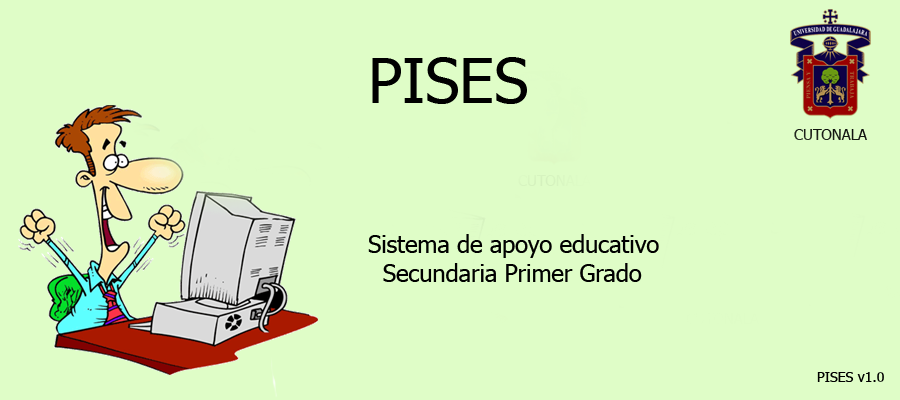
<style>
.page{position:relative;width:900px;height:400px;background:#dffdc7}
.page>*{position:absolute;margin:0}
.t1{font:61.8px "Tahoma";color:#000000}
.t2{font:23.6px "Tahoma";color:#000000}
.t3{font:14px "Tahoma";color:#000000}
</style>
<div class="page">
<p class="t1" style="left:372px;top:57px;width:155px;height:47px">PISES</p>
<p class="t2" style="left:368px;top:234px;width:291px;height:48px">Sistema de apoyo educativo<br>  Secundaria Primer Grado</p>
<p class="t3" style="left:817px;top:372px;width:67px;height:10px">PISES v1.0</p>
</div>
